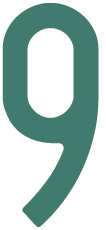
<style>
.page{position:relative;width:106px;height:230px;background:#ffffff}
.page>*{position:absolute;margin:0}
.t1{font:225px "LICENSEPLATEUSA";letter-spacing:-0.04em;color:#427a6d}
</style>
<div class="page">
<p class="t1" style="left:2px;top:2px;width:97px;height:225px">9</p>
</div>
